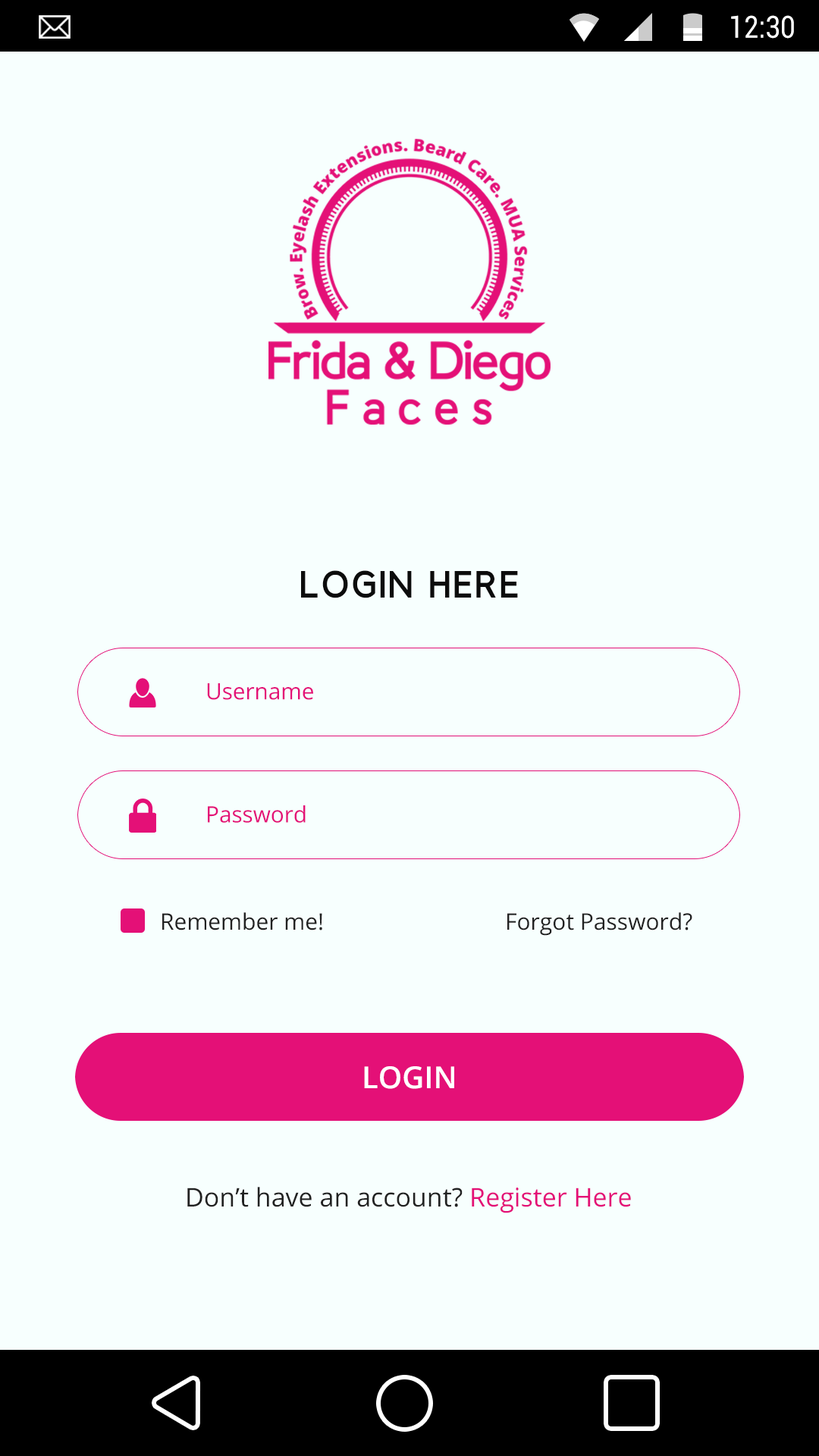
<style>
.page{position:relative;width:819px;height:1456px;background:#f7fffe}
.page>*{position:absolute;margin:0}
.t1{font:30.5px "Roboto-Regular";color:#ffffff;scale:0.87 1}
.t2{font:37.9px "BerlinBold";letter-spacing:0.1em;color:#0c0c0c}
.t3{font:22.5px "OpenSans";color:#e41077}
.t4{font:22.7px "OpenSans";color:#222222}
.t5{font:30.3px "OpenSans-Semibold";color:#ffffff}
.t6{font:25.8px "OpenSans";color:#222222}
.t7{font:25.8px "OpenSans";color:#e41077}
</style>
<div class="page">
<p class="t1" style="left:731px;top:15px;width:63px;height:24px">12:30</p>
<p class="t2" style="left:301px;top:570px;width:217px;height:28px">LOGIN HERE</p>
<p class="t3" style="left:207px;top:683px;width:106px;height:17px">Username</p>
<p class="t3" style="left:208px;top:805px;width:98px;height:18px">Password</p>
<p class="t4" style="left:162px;top:912px;width:160px;height:18px">Remember me!</p>
<p class="t4" style="left:507px;top:912px;width:185px;height:24px">Forgot Password?</p>
<p class="t5" style="left:364px;top:1066px;width:90px;height:23px">LOGIN</p>
<p class="t6" style="left:187px;top:1187px;width:444px;height:26px">Don’t have an account? <span class="t7">Register Here</span></p>
</div>
